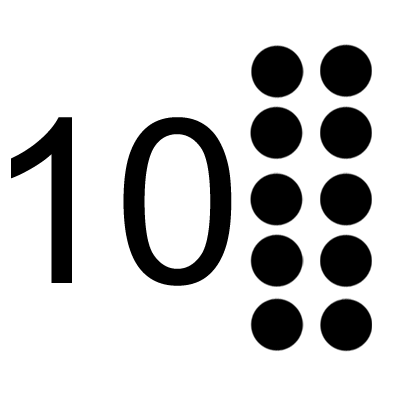
<style>
.page{position:relative;width:400px;height:400px;background:#ffffff}
.page>*{position:absolute;margin:0}
.t1{font:230.3px "ArialMT";color:#000000}
</style>
<div class="page">
<p class="t1" style="left:11px;top:117px;width:221px;height:169px">10</p>
</div>
